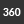
<style>
.page{position:relative;width:24px;height:24px;background:#333333}
.page>*{position:absolute;margin:0}
.t1{font:10px "Lato-Bold";color:#ffffff}
</style>
<div class="page">
<p class="t1" style="left:3px;top:8px;width:18px;height:8px">360</p>
</div>
